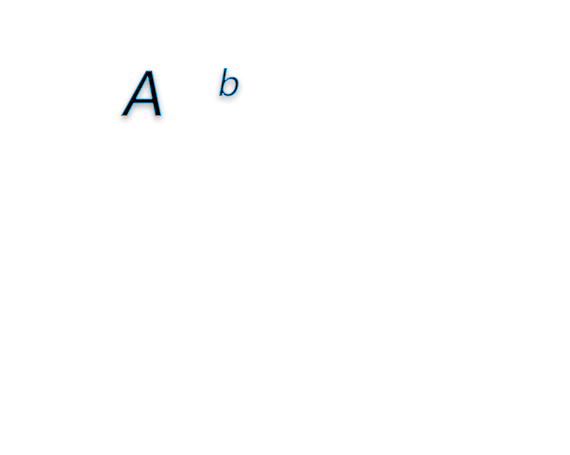
<style>
.page{position:relative;width:570px;height:455px;background:#ffffff}
.page>*{position:absolute;margin:0}
.t1{font:60px "MicrosoftYaHei";letter-spacing:0.9em;font-style:italic}
</style>
<div class="page">
<p class="t1" style="left:120px;top:68px;width:119px;height:48px">Ab</p>
</div>
